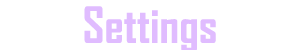
<style>
.page{position:relative;width:300px;height:50px;background:#ffffff}
.page>*{position:absolute;margin:0}
.t1{font:48px "AgencyFB-Bold";color:#e0bcff}
</style>
<div class="page">
<p class="t1" style="left:84px;top:6px;width:132px;height:46px">Settings</p>
</div>
